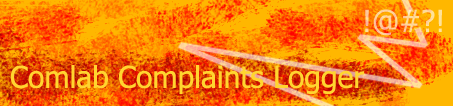
<style>
.page{position:relative;width:453px;height:106px}
.page>*{position:absolute;margin:0}
.t1{font:30px "Tahoma";color:#ffd599}
.t2{font:30px "Tahoma";color:#ffd52f}
</style>
<div class="page">
<p class="t1" style="left:365px;top:9px;width:77px;height:27px">!@#?!</p>
<p class="t2" style="left:10px;top:65px;width:354px;height:29px">Comlab Complaints Logger</p>
</div>
